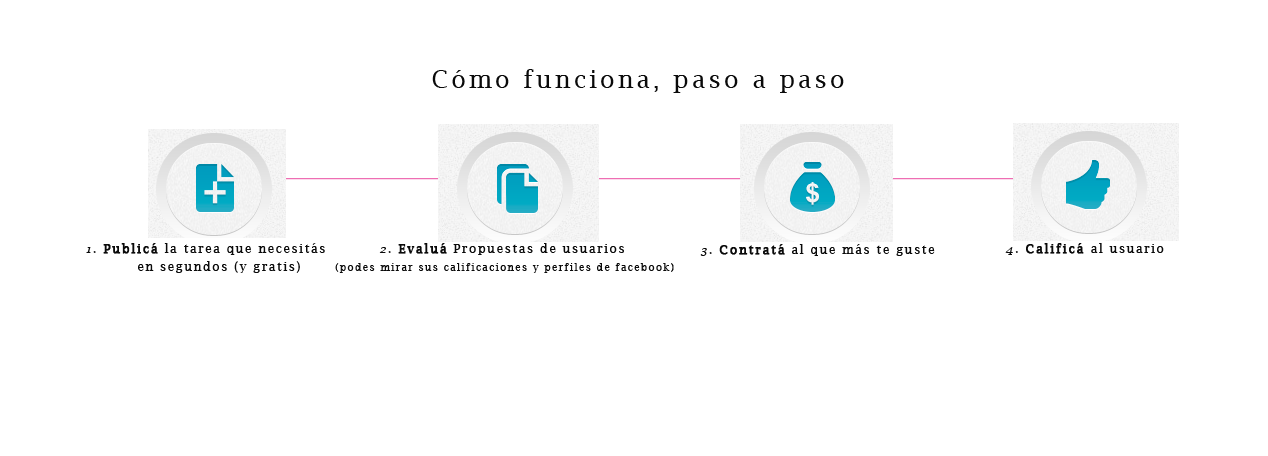
<style>
.page{position:relative;width:1268px;height:456px;background:#ffffff}
.page>*{position:absolute;margin:0}
.t1{font:24px "LucidaBright";letter-spacing:0.14em;color:#0a0a0a}
.t2{font:12px/4.5px "LucidaBright";letter-spacing:0.14em;color:#0a0a0a}
.t3{font:12px/4.5px "LucidaCalligraphy-Italic";letter-spacing:0.14em;color:#0a0a0a}
.t4{font:12px/4.5px "LucidaBright";letter-spacing:0.14em;color:#0a0a0a;font-weight:bold}
.t5{font:10px/4.5px "LucidaBright";letter-spacing:0.14em;color:#0a0a0a}
.t6{font:12px "LucidaBright";letter-spacing:0.14em;color:#0a0a0a}
.t7{font:12px "LucidaCalligraphy-Italic";letter-spacing:0.14em;color:#0a0a0a}
.t8{font:12px "LucidaBright";letter-spacing:0.14em;color:#0a0a0a;font-weight:bold}
</style>
<div class="page">
<p class="t1" style="left:432px;top:69px;width:412px;height:24px">Cómo funciona, paso a paso</p>
<p class="t2" style="left:86px;top:243px;width:239px;height:30px;text-align:center"><span class="t3">1. </span><span class="t4">Publicá</span> la tarea que necesitás<br>  <br><br><br>     en segundos (y gratis)</p>
<p class="t5" style="left:335px;top:243px;width:339px;height:30px;text-align:center"><span class="t3">2. </span><span class="t4">Evaluá</span><span class="t2"> Propuestas de usuarios <br><br><br><br></span>(podes mirar sus calificaciones y perfiles de facebook)</p>
<p class="t6" style="left:700px;top:244px;width:235px;height:12px"><span class="t7">3. </span><span class="t8">Contratá</span> al que más te guste</p>
<p class="t6" style="left:1005px;top:243px;width:159px;height:12px"><span class="t7">4. </span><span class="t8">Calificá </span>al usuario</p>
</div>
